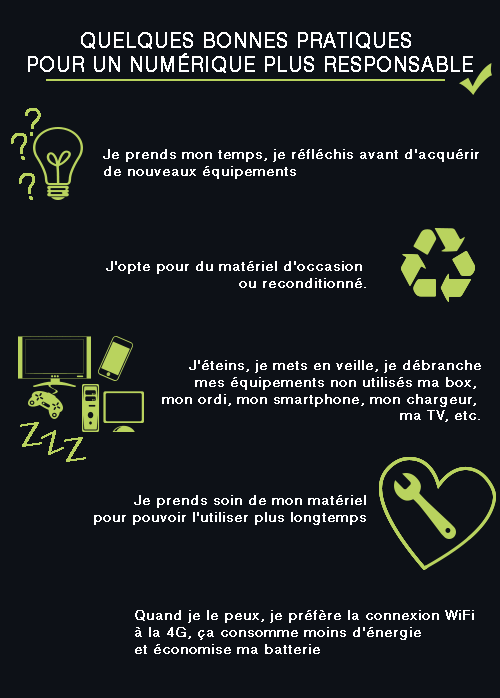
<style>
.page{position:relative;width:500px;height:698px;background:#0d1117}
.page>*{position:absolute;margin:0}
.t1{font:20px "Helvetica-Light";color:#fefefe;font-weight:bold}
.t2{font:35.7px "Helvetica-Light";color:#b9d35e;font-weight:bold}
.t3{font:36px "Helvetica-Light";color:#b9d35e;font-weight:bold}
.t4{font:14px "Helvetica-Light";color:#fefefe;font-weight:bold}
.t5{font:14px "Helvetica-Light";color:#ffffff;font-weight:bold}
.t6{font:29.7px "Helvetica-Light";color:#b9d35e;font-weight:bold;scale:1.21 1}
.t7{font:25.1px "Helvetica-Light";color:#b9d35e;font-weight:bold;scale:1.21 1}
.t8{font:14px "Helvetica-Light";color:#feffff;font-weight:bold}
</style>
<div class="page">
<p class="t1" style="left:28px;top:32px;width:445px;height:41px;text-align:center">QUELQUES BONNES PRATIQUES <br>POUR UN NUMÉRIQUE PLUS RESPONSABLE</p>
<p class="t2" style="left:25px;top:108px;width:16px;height:28px;rotate:5deg">?</p>
<p class="t3" style="left:11px;top:133px;width:16px;height:27px;rotate:-14deg">?</p>
<p class="t4" style="left:103px;top:149px;width:376px;height:30px">Je prends mon temps, je réfléchis avant d’acquérir<br>de nouveaux équipements</p>
<p class="t3" style="left:19px;top:173px;width:16px;height:27px;rotate:-14deg">?</p>
<p class="t5" style="left:106px;top:261px;width:260px;height:27px;text-align:right">J’opte pour du matériel d’occasion <br>ou reconditionné.</p>
<p class="t5" style="left:162px;top:360px;width:319px;height:62px;text-align:right">J’éteins, je mets en veille, je débranche<br>mes équipements non utilisés ma box, <br>mon ordi, mon smartphone, mon chargeur, <br>ma TV, etc.</p>
<p class="t6" style="left:20px;top:422px;width:22px;height:25px;rotate:-8deg">Z</p>
<p class="t7" style="left:41px;top:430px;width:23px;height:25px;rotate:-25deg">Z</p>
<p class="t6" style="left:64px;top:437px;width:22px;height:25px;rotate:-8deg">Z</p>
<p class="t8" style="left:94px;top:495px;width:272px;height:30px;text-align:right">Je prends soin de mon matériel<br>pour pouvoir l’utiliser plus longtemps</p>
<p class="t5" style="left:135px;top:610px;width:339px;height:44px">Quand je le peux, je préfère la connexion WiFi<br>à la 4G, ça consomme moins d’énergie<br>et économise ma batterie</p>
</div>
